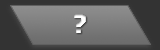
<style>
.page{position:relative;width:160px;height:50px;background:#333333}
.page>*{position:absolute;margin:0}
.t1{font:23.3px "Revue"}
</style>
<div class="page">
<p class="t1" style="left:74px;top:14px;width:12px;height:19px">?</p>
</div>
